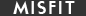
<style>
.page{position:relative;width:86px;height:16px;background:#333333}
.page>*{position:absolute;margin:0}
.t1{font:16.7px "Moderna";letter-spacing:0.15em;color:#ffffff}
</style>
<div class="page">
<p class="t1" style="left:13px;top:1px;width:62px;height:13px">MISFIT</p>
</div>
